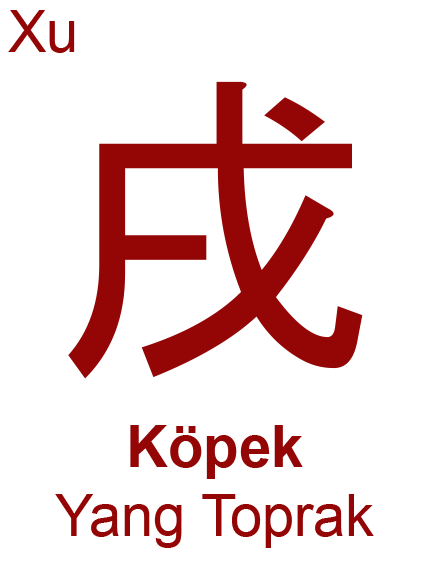
<style>
.page{position:relative;width:429px;height:574px;background:#ffffff}
.page>*{position:absolute;margin:0}
.t1{font:57.8px "ArialMT";color:#940606}
.t2{font:330.5px "MS-Gothic";color:#940606}
.t3{font:57.8px "Arial-BoldMT";color:#940606}
</style>
<div class="page">
<p class="t1" style="left:8px;top:10px;width:67px;height:43px">Xu</p>
<p class="t2" style="left:68px;top:81px;width:295px;height:298px">戌</p>
<p class="t1" style="left:55px;top:425px;width:319px;height:123px;text-align:center"><span class="t3">Köpek<br></span>Yang Toprak</p>
</div>
